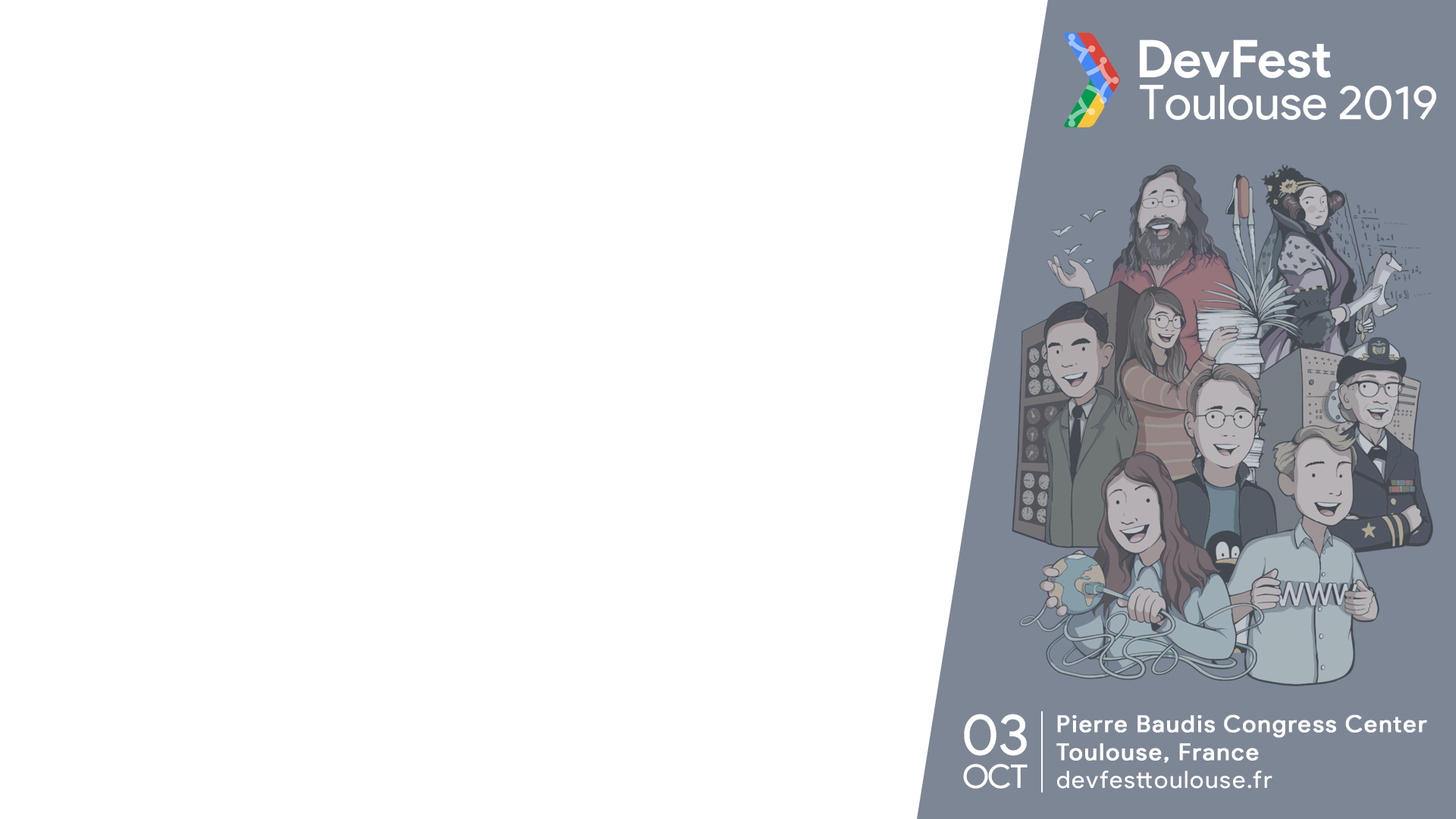
<style>
.page{position:relative;width:1456px;height:819px;background:#ffffff}
.page>*{position:absolute;margin:0}
.t1{font:32.6px/33.3px "ProductSans-Regular";letter-spacing:-0.04em;color:#ffffff}
.t2{font:57.6px/33.3px "ProductSans-Regular";letter-spacing:-0.02em;color:#ffffff}
.t3{font:23.1px "ProductSans-Regular";letter-spacing:0.06em;color:#ffffff;font-weight:bold}
.t4{font:23.9px "ProductSans-Regular";letter-spacing:0.06em;color:#ffffff}
</style>
<div class="page">
<p class="t1" style="left:963px;top:714px;width:65px;height:75px;text-align:center"><span class="t2">03<br></span>OCT</p>
<p class="t3" style="left:1056px;top:714px;width:371px;height:75px">Pierre Baudis Congress Center<br>Toulouse, France<br><span class="t4">devfesttoulouse.fr</span></p>
</div>
